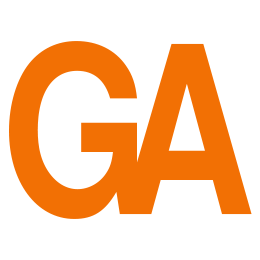
<style>
.page{position:relative;width:260px;height:260px;background:#ffffff}
.page>*{position:absolute;margin:0}
.t1{font:233.3px "Helvetica-Narrow-Bold";letter-spacing:-0.14em;color:#f27004}
</style>
<div class="page">
<p class="t1" style="left:9px;top:41px;width:243px;height:178px">GA</p>
</div>
